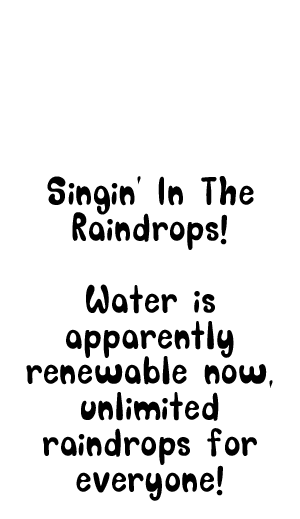
<style>
.page{position:relative;width:300px;height:519px;background:#ffffff}
.page>*{position:absolute;margin:0}
.t1{font:29.9px "SORRY_SORRY";letter-spacing:0.03em;color:#000000}
</style>
<div class="page">
<p class="t1" style="left:26px;top:176px;width:247px;height:325px;text-align:center">Singin' In The Raindrops!<br><br>Water is apparently renewable now, unlimited raindrops for everyone!</p>
</div>
